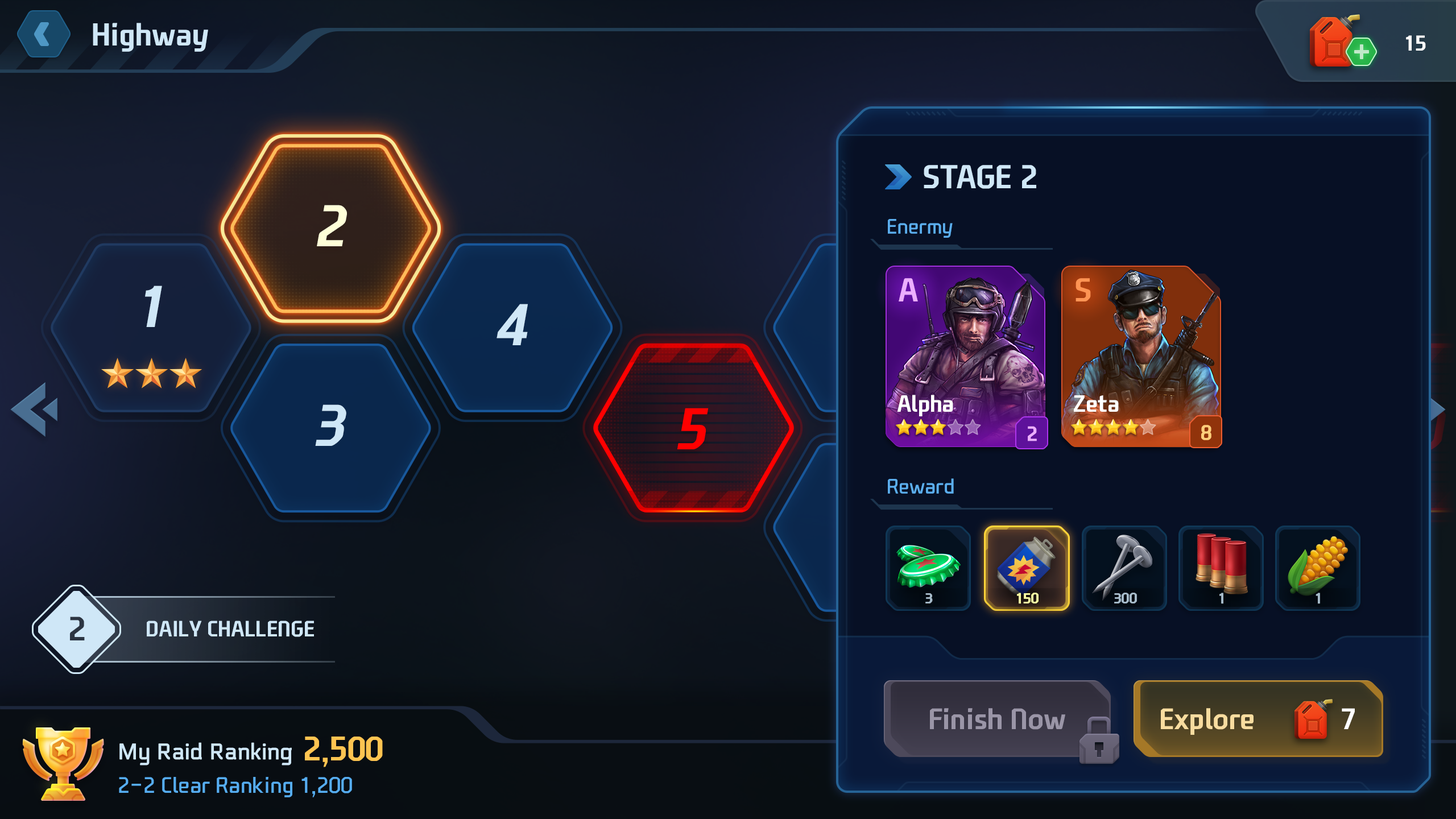
<style>
.page{position:relative;width:1456px;height:819px}
.page>*{position:absolute;margin:0}
.t1{font:30.6px "NEXONFootballGothicB";color:#cfe7f7}
.t2{font:20.7px "NEXONFootballGothicB";color:#ffffff;text-transform:uppercase}
.t3{font:31.8px "NEXONFootballGothicB";color:#cfe7f7;text-transform:uppercase}
.t4{font:56.3px "NEXONFootballGothicB";color:#ffffd8;font-style:italic}
.t5{font:20.5px "NEXONFootballGothicL";color:#5baeee}
.t6{font:31.8px "NEXONFootballGothicB";letter-spacing:-0.02em;color:#ecaeff;text-transform:uppercase}
.t7{font:31.8px "NEXONFootballGothicB";letter-spacing:-0.02em;color:#ff9454;text-transform:uppercase}
.t8{font:56.3px "NEXONFootballGothicB";color:#cfe7f7;font-style:italic}
.t9{font:22.7px "NEXONFootballGothicB";color:#ffffff}
.t10{font:56.3px "NEXONFootballGothicB";color:#ff0000;font-style:italic}
.t11{font:19.9px "NEXONFootballGothicB";color:#ecaeff}
.t12{font:19.9px "NEXONFootballGothicB";color:#ffce7a}
.t13{font:14.3px "NEXONFootballGothicB";color:#a7bbca;text-transform:uppercase}
.t14{font:14.3px "NEXONFootballGothicB";color:#faffa3;text-transform:uppercase}
.t15{font:32.6px "NEXONFootballGothicB";color:#2c3542}
.t16{font:21.3px "NEXONFootballGothicB";color:#cfe7f7;text-transform:uppercase}
.t17{font:28.4px "NEXONFootballGothicB";color:#9a95a7}
.t18{font:28.4px "NEXONFootballGothicB";color:#f8dc9f}
.t19{font:28.4px "NEXONFootballGothicB";color:#ffffff}
.t20{font:32.7px "NEXONFootballGothicB";color:#ffc451}
.t21{font:21.8px "Electrolize-Regular";color:#cfe7f7;font-weight:bold}
.t22{font:21.8px "NEXONFootballGothicL";color:#56adf1}
</style>
<div class="page">
<p class="t1" style="left:93px;top:23px;width:115px;height:29px">Highway</p>
<p class="t2" style="left:1406px;top:35px;width:20px;height:16px">15</p>
<p class="t3" style="left:924px;top:165px;width:112px;height:24px">Stage 2</p>
<p class="t4" style="left:317px;top:205px;width:30px;height:41px">2</p>
<p class="t5" style="left:888px;top:219px;width:65px;height:19px">Enermy</p>
<p class="t6" style="left:899px;top:278px;width:19px;height:23px">A</p>
<p class="t7" style="left:1075px;top:278px;width:16px;height:23px">s</p>
<p class="t8" style="left:145px;top:286px;width:17px;height:41px">1</p>
<p class="t8" style="left:497px;top:304px;width:31px;height:41px">4</p>
<p class="t9" style="left:897px;top:395px;width:56px;height:21px">Alpha</p>
<p class="t9" style="left:1074px;top:395px;width:45px;height:17px">Zeta</p>
<p class="t8" style="left:315px;top:404px;width:31px;height:42px">3</p>
<p class="t10" style="left:677px;top:408px;width:32px;height:41px">5</p>
<p class="t11" style="left:1028px;top:426px;width:9px;height:15px">2</p>
<p class="t12" style="left:1201px;top:425px;width:10px;height:15px">8</p>
<p class="t5" style="left:888px;top:478px;width:66px;height:16px">Reward</p>
<p class="t13" style="left:925px;top:593px;width:8px;height:10px">3</p>
<p class="t14" style="left:1017px;top:593px;width:22px;height:11px">150</p>
<p class="t13" style="left:1114px;top:593px;width:23px;height:10px">300</p>
<p class="t13" style="left:1219px;top:593px;width:4px;height:11px">1</p>
<p class="t13" style="left:1316px;top:593px;width:4px;height:11px">1</p>
<p class="t15" style="left:70px;top:617px;width:15px;height:23px">2</p>
<p class="t16" style="left:147px;top:620px;width:167px;height:17px">Daily Challenge</p>
<p class="t17" style="left:930px;top:708px;width:135px;height:22px">Finish Now</p>
<p class="t18" style="left:1161px;top:708px;width:93px;height:27px">Explore</p>
<p class="t19" style="left:1342px;top:708px;width:13px;height:21px">7</p>
<p class="t20" style="left:305px;top:737px;width:78px;height:30px">2,500</p>
<p class="t21" style="left:119px;top:742px;width:173px;height:24px">My Raid Ranking</p>
<p class="t22" style="left:119px;top:777px;width:233px;height:20px">2-2 Clear Ranking 1,200</p>
</div>
